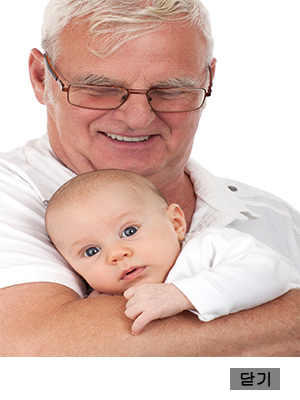
<style>
.page{position:relative;width:300px;height:400px;background:#ffffff}
.page>*{position:absolute;margin:0}
.t1{font:16.7px "Gulim";color:#000000;font-weight:bold}
</style>
<div class="page">
<p class="t1" style="left:240px;top:372px;width:30px;height:15px">닫기</p>
</div>
